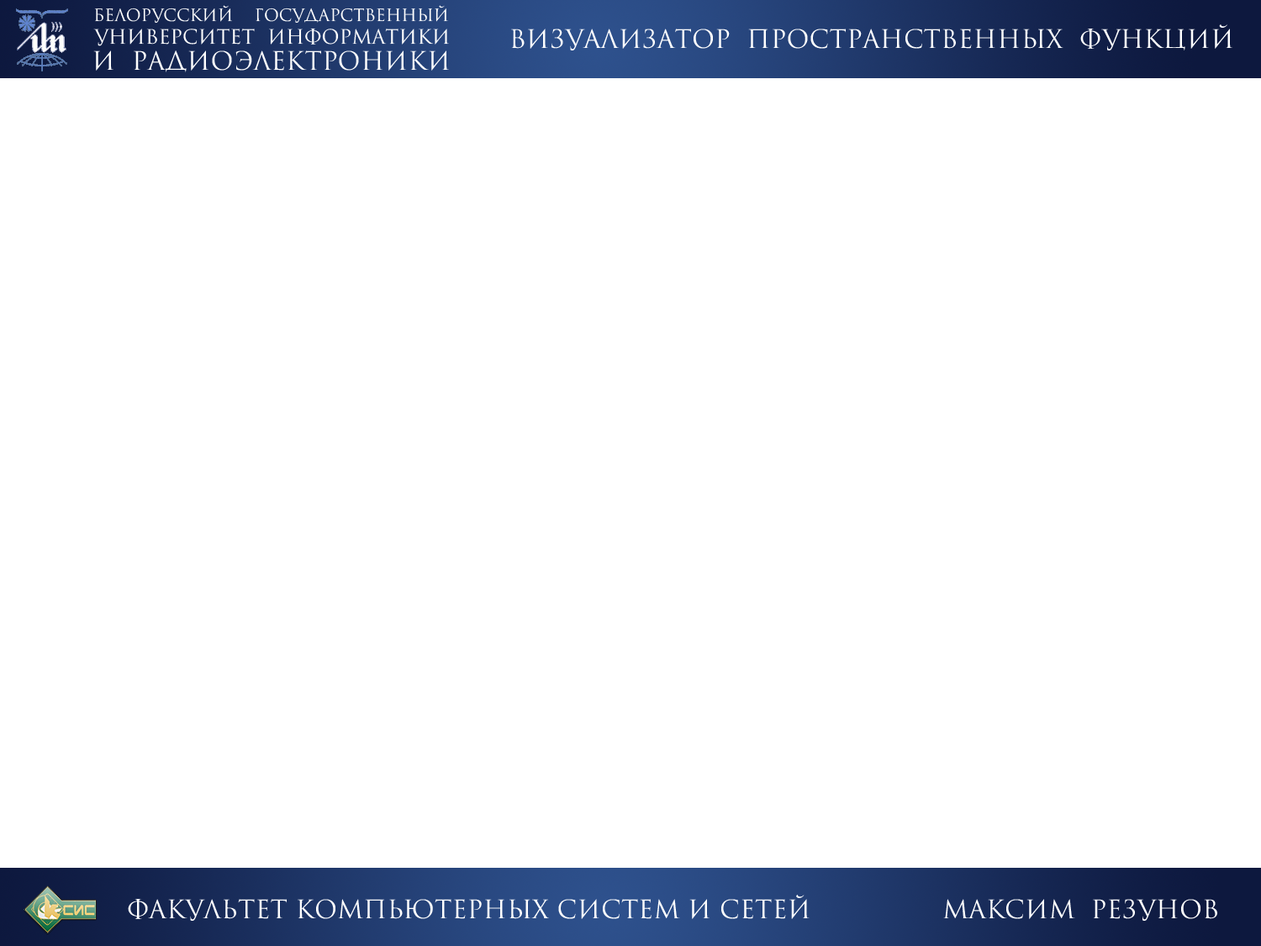
<style>
.page{position:relative;width:1261px;height:946px;background:#ffffff}
.page>*{position:absolute;margin:0}
.t1{font:16.3px "Romul";color:#ffffff}
.t2{font:19.3px "Romul";color:#ffffff}
.t3{font:24.9px "Romul";color:#ffffff}
</style>
<div class="page">
<p class="t1" style="left:94px;top:5px;width:354px;height:19px">белорусский    государственный</p>
<p class="t2" style="left:93px;top:28px;width:356px;height:18px">университет  информатики</p>
<p class="t3" style="left:511px;top:24px;width:721px;height:26px">визуализатор  пространственных  функций</p>
<p class="t3" style="left:93px;top:50px;width:356px;height:22px">и  радиоэлектроники</p>
<p class="t3" style="left:128px;top:894px;width:682px;height:26px">факультет компьютерных систем и сетей</p>
<p class="t3" style="left:943px;top:899px;width:274px;height:21px">Максим  Резунов</p>
</div>
